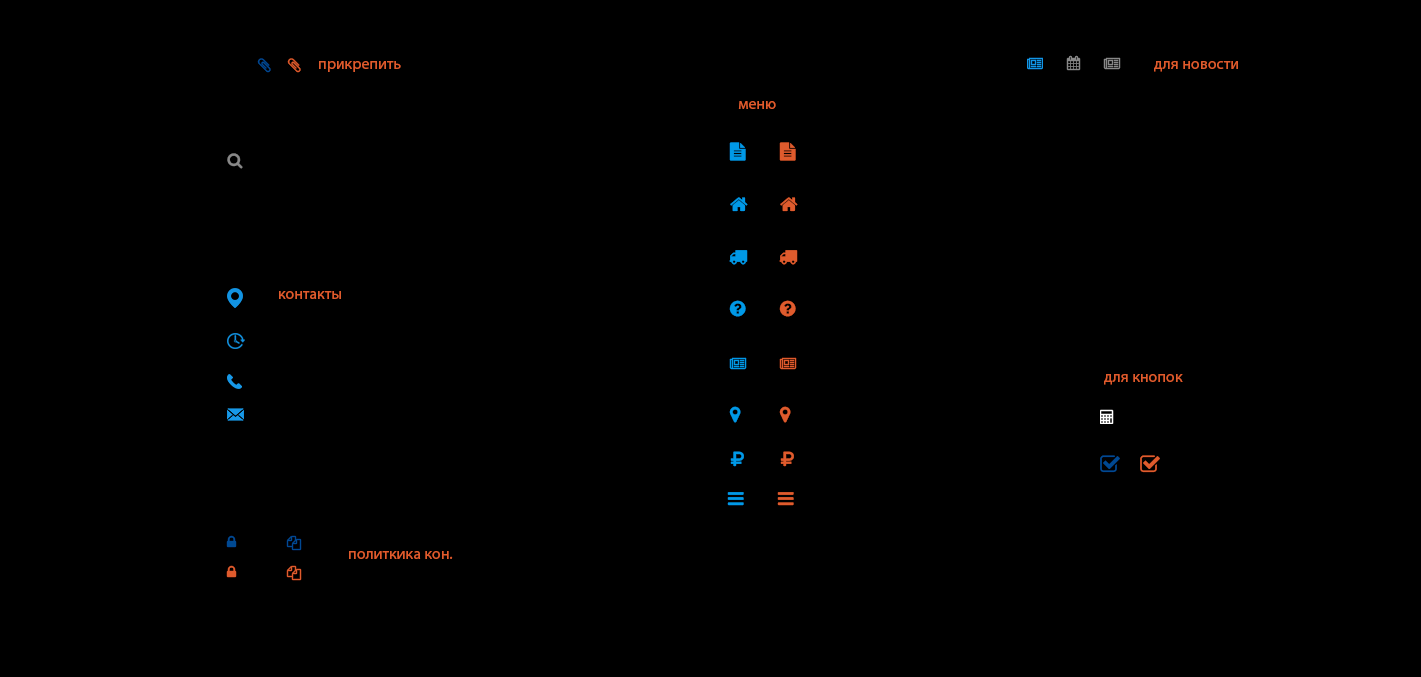
<style>
.page{position:relative;width:1421px;height:677px;background:#000000}
.page>*{position:absolute;margin:0}
.t1{font:16px "MyriadPro-Regular";color:#df5b2d}
</style>
<div class="page">
<p class="t1" style="left:319px;top:61px;width:82px;height:11px">прикрепить</p>
<p class="t1" style="left:1154px;top:61px;width:84px;height:11px">для новости</p>
<p class="t1" style="left:738px;top:101px;width:38px;height:8px">меню</p>
<p class="t1" style="left:279px;top:291px;width:62px;height:8px">контакты</p>
<p class="t1" style="left:1104px;top:374px;width:79px;height:11px">для кнопок</p>
<p class="t1" style="left:349px;top:551px;width:104px;height:8px">политкика кон.</p>
</div>
